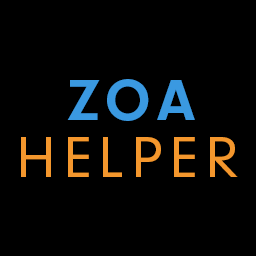
<style>
.page{position:relative;width:256px;height:256px;background:#000000}
.page>*{position:absolute;margin:0}
.t1{font:60px "NeuzeitGro-Bol";letter-spacing:0.115em;color:#3a99e1}
.t2{font:60px "NeuzeitGro-Reg";letter-spacing:0.115em;color:#f4972d}
</style>
<div class="page">
<p class="t1" style="left:67px;top:79px;width:128px;height:42px">ZOA</p>
<p class="t2" style="left:21px;top:137px;width:217px;height:40px">HELPER</p>
</div>
